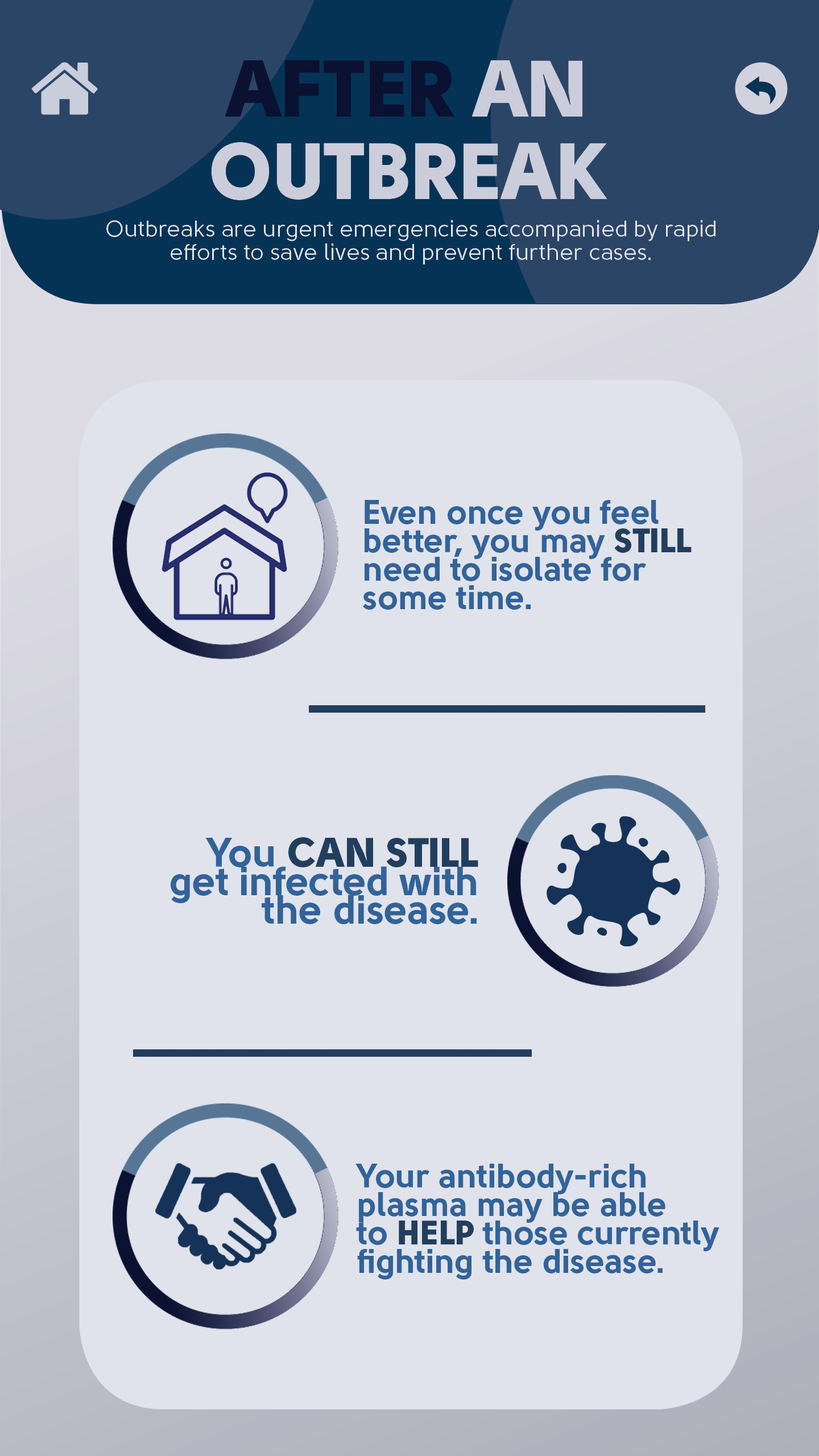
<style>
.page{position:relative;width:819px;height:1456px;background:#e0e3ec}
.page>*{position:absolute;margin:0}
.t1{font:34.1px/28.4px "Solomon-Sans-Bold";color:#326399}
.t2{font:34.1px/28.4px "Solomon-Sans-Black";color:#223e5d}
.t3{font:40.9px/28.4px "Solomon-Sans-Bold";color:#326399}
.t4{font:40.9px/28.4px "Solomon-Sans-Black";color:#223e5d}
</style>
<div class="page">
<p class="t1" style="left:363px;top:500px;width:329px;height:110px">Even once you feel<br>better, you may <span class="t2">STILL<br></span>need to isolate for<br>some time.</p>
<p class="t3" style="left:171px;top:837px;width:307px;height:87px;text-align:right">You <span class="t4">CAN STILL<br></span>get infected with<br>the disease.</p>
<p class="t1" style="left:355px;top:1164px;width:364px;height:116px">Your antibody-rich<br>plasma may be able<br>to <span class="t2">HELP </span>those currently<br>fighting the disease.</p>
</div>
